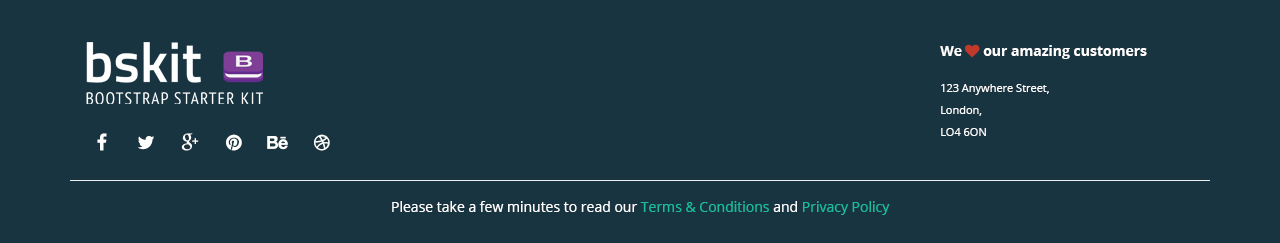
<style>
.page{position:relative;width:1280px;height:243px;background:#193441}
.page>*{position:absolute;margin:0}
.t1{font:11px/22px "OpenSans";color:#ffffff}
.t2{font:14px "OpenSans";color:#ffffff}
.t3{font:14px "OpenSans";color:#1abc9c}
</style>
<div class="page">
<p class="t1" style="left:941px;top:84px;width:108px;height:52px">123 Anywhere Street,<br>London,<br>LO4 6ON</p>
<p class="t2" style="left:392px;top:201px;width:498px;height:14px">Please take a few minutes to read our <span class="t3">Terms &amp; Conditions</span> and <span class="t3">Privacy Policy</span></p>
</div>
